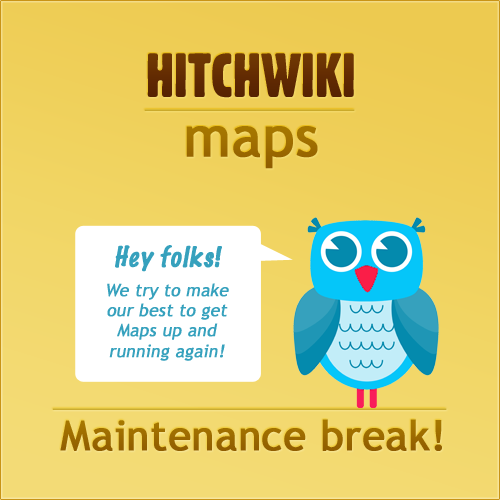
<style>
.page{position:relative;width:500px;height:500px}
.page>*{position:absolute;margin:0}
.t1{font:60.8px "Gothic821CondensedBT-Regular";color:#632b02;text-transform:uppercase}
.t2{font:56.4px "TrebuchetMS";color:#9d6b00;font-weight:bold}
.t3{font:17px "TrebuchetMS";color:#36a1bd;font-weight:bold;font-style:italic}
.t4{font:25px "MarkerFelt-Thin";color:#36a1bd;font-weight:bold;font-style:italic}
.t5{font:41.3px "TrebuchetMS";color:#9d6b00;font-weight:bold}
</style>
<div class="page">
<p class="t1" style="left:147px;top:53px;width:207px;height:45px">Hitchwiki</p>
<p class="t2" style="left:186px;top:126px;width:132px;height:43px">maps</p>
<p class="t3" style="left:107px;top:245px;width:122px;height:116px;text-align:center"><span class="t4">Hey folks!<br></span><br>We try to make our best to get Maps up and running again!</p>
<p class="t5" style="left:60px;top:419px;width:382px;height:32px">Maintenance break!</p>
</div>
